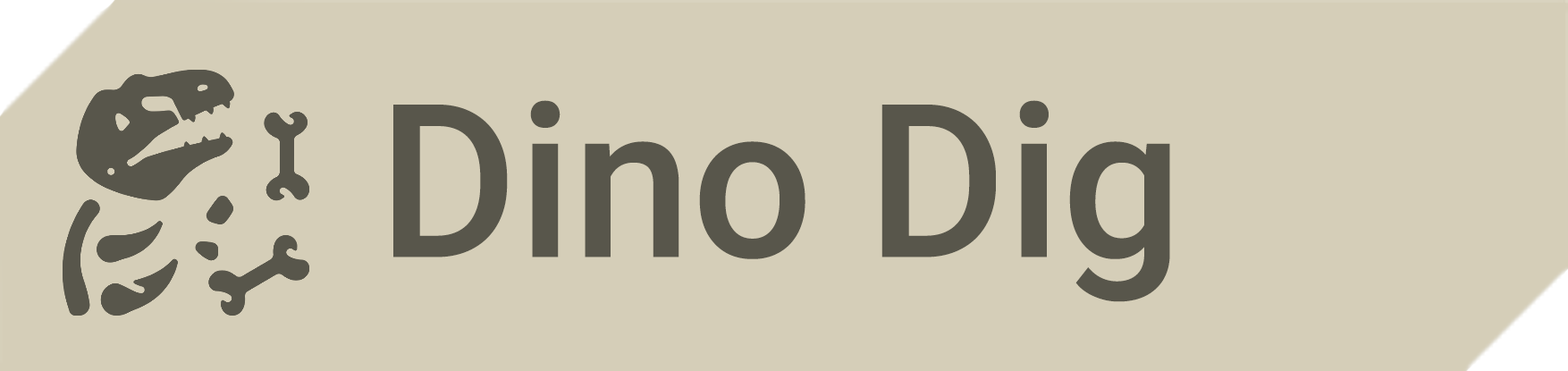
<style>
.page{position:relative;width:1568px;height:371px;background:#d5ceb8}
.page>*{position:absolute;margin:0}
.t1{font:214.2px "Roboto-Medium";color:#58564b}
</style>
<div class="page">
<p class="t1" style="left:393px;top:100px;width:777px;height:202px">Dino Dig</p>
</div>
